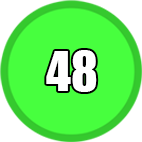
<style>
.page{position:relative;width:142px;height:142px;background:#47ff3e}
.page>*{position:absolute;margin:0}
.t1{font:50px "Impact";color:#ffffff}
</style>
<div class="page">
<p class="t1" style="left:46px;top:50px;width:51px;height:42px">48</p>
</div>
